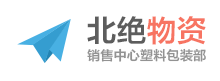
<style>
.page{position:relative;width:220px;height:81px;background:#ffffff}
.page>*{position:absolute;margin:0}
.t1{font:30px "FZLTH6K--GBK1-0";color:#5d5d5d;text-transform:uppercase}
.t2{font:30px "FZLTH6K--GBK1-0";color:#f77462;text-transform:uppercase}
.t3{font:13.2px "FZLTH6K--GBK1-0";color:#939393;text-transform:uppercase}
</style>
<div class="page">
<p class="t1" style="left:87px;top:16px;width:119px;height:29px">北绝<span class="t2">物资</span></p>
<p class="t3" style="left:87px;top:48px;width:119px;height:14px">销售中心塑料包装部</p>
</div>
